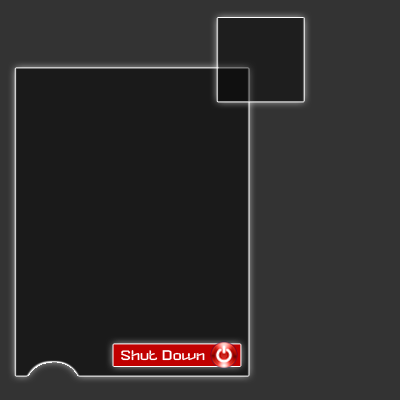
<style>
.page{position:relative;width:400px;height:400px;background:#333333}
.page>*{position:absolute;margin:0}
.t1{font:13.7px "DYLOVASTUFF";color:#ffffff;scale:1.32 1}
</style>
<div class="page">
<p class="t1" style="left:121px;top:350px;width:84px;height:11px">Shut Down</p>
</div>
